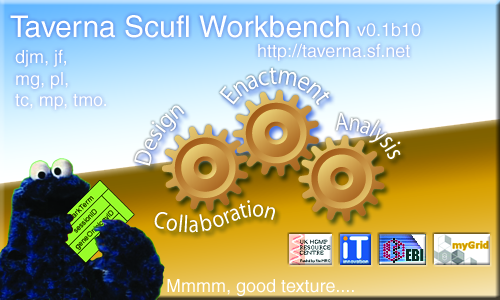
<style>
.page{position:relative;width:500px;height:300px}
.page>*{position:absolute;margin:0}
.t1{font:30px "Helvetica";color:#ffffff}
.t2{font:18px "Helvetica";color:#ffffff}
</style>
<div class="page">
<p class="t1" style="left:10px;top:15px;width:339px;height:23px">Taverna Scufl Workbench</p>
<p class="t2" style="left:357px;top:23px;width:64px;height:14px">v0.1b10</p>
<p class="t2" style="left:15px;top:49px;width:91px;height:61px">djm, jf,<br>mg, pl,<br>tc, mp, tmo.</p>
<p class="t2" style="left:258px;top:43px;width:152px;height:18px">http://taverna.sf.net</p>
<p class="t2" style="left:167px;top:279px;width:187px;height:17px">Mmmm, good texture....</p>
</div>
